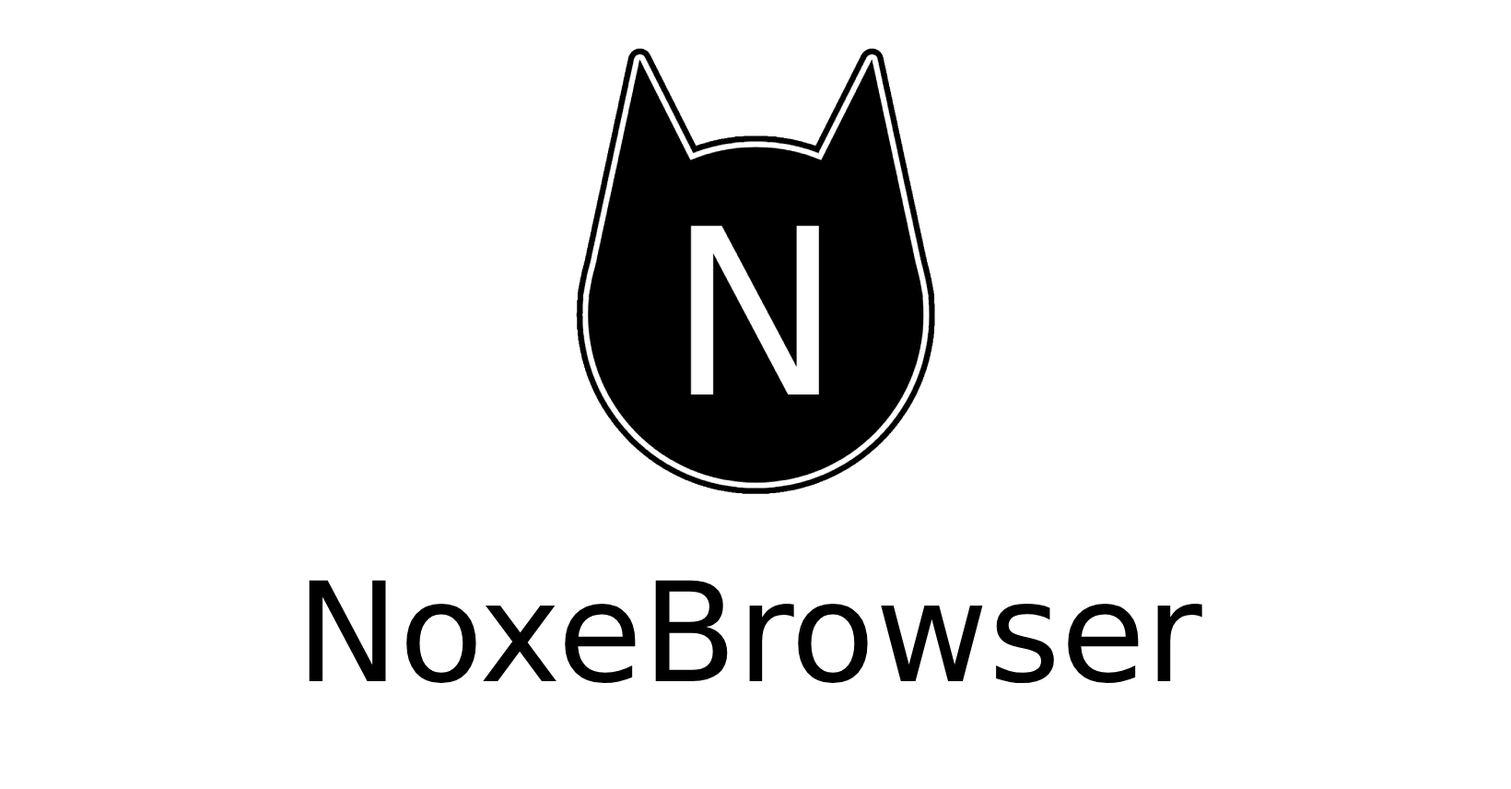
<style>
.page{position:relative;width:1511px;height:789px;background:#ffffff}
.page>*{position:absolute;margin:0}
.t1{font:138.2px "Counter-StrikeRegular";color:#000000}
</style>
<div class="page">
<p class="t1" style="left:309px;top:580px;width:894px;height:103px">NoxeBrowser</p>
</div>
